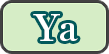
<style>
.page{position:relative;width:109px;height:54px;background:#d6edc6}
.page>*{position:absolute;margin:0}
.t1{font:36px "RyuminPro-ExBold";color:#ffffff}
</style>
<div class="page">
<p class="t1" style="left:33px;top:14px;width:45px;height:27px">Ya</p>
</div>
